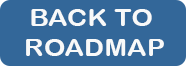
<style>
.page{position:relative;width:186px;height:66px;background:#336799}
.page>*{position:absolute;margin:0}
.t1{font:24px/30px "ArialRoundedMTBold";color:#f8f9f9;scale:1.14 1}
</style>
<div class="page">
<p class="t1" style="left:26px;top:9px;width:138px;height:47px;text-align:center">BACK TO <br>ROADMAP</p>
</div>
